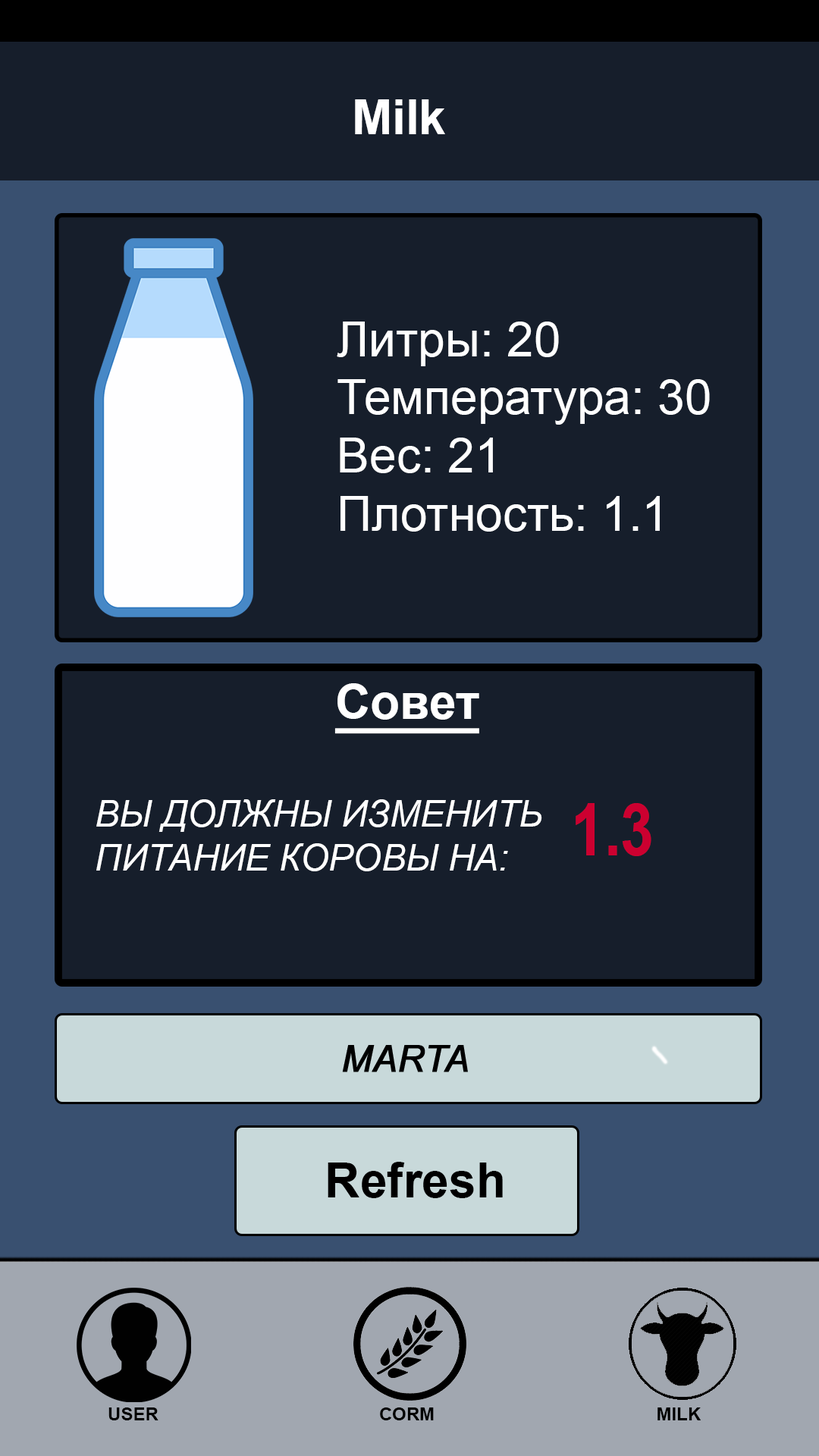
<style>
.page{position:relative;width:819px;height:1456px;background:#161e2b}
.page>*{position:absolute;margin:0}
.t1{font:48.5px "Arial-BoldMT";color:#ffffff}
.t2{font:48.5px "ArialMT";color:#ffffff}
.t3{font:48.5px "Arial-BoldMT";color:#ffffff;text-decoration:underline}
.t4{font:36.4px "Arial-ItalicMT";color:#ffffff;text-transform:uppercase}
.t5{font:72.8px "ArialNarrow-Bold";color:#cc0030;text-transform:uppercase}
.t6{font:48.5px "Arial-BoldMT";color:#000000}
.t7{font:18.2px "Arial-BoldMT";color:#000000}
</style>
<div class="page">
<p class="t1" style="left:355px;top:99px;width:90px;height:35px">Milk</p>
<p class="t2" style="left:337px;top:322px;width:373px;height:210px">Литры: 20<br>Температура: 30<br>Вес: 21<br>Плотность: 1.1</p>
<p class="t3" style="left:334px;top:683px;width:145px;height:51px">Совет</p>
<p class="t4" style="left:96px;top:799px;width:446px;height:72px">Вы должны изменить<br>питание коровы на:</p>
<p class="t5" style="left:576px;top:803px;width:75px;height:53px">1.3</p>
<p class="t6" style="left:328px;top:1162px;width:175px;height:36px">Refresh</p>
<p class="t7" style="left:108px;top:1407px;width:50px;height:13px">USER</p>
<p class="t7" style="left:380px;top:1407px;width:54px;height:13px">CORM</p>
<p class="t7" style="left:657px;top:1407px;width:44px;height:13px">MILK</p>
</div>
